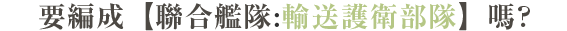
<style>
.page{position:relative;width:567px;height:31px;background:#ffffff}
.page>*{position:absolute;margin:0}
.t1{font:28px "RyuminPr6N-ExBold";letter-spacing:0.05em;color:#4c4843}
.t2{font:28px "RyuminPr6N-ExBold";letter-spacing:0.05em;color:#323232}
.t3{font:28px "RyuminPr6N-ExBold";letter-spacing:0.05em;color:#b5c785}
</style>
<div class="page">
<p class="t1" style="left:39px;top:2px;width:491px;height:29px">要編成【聯合艦隊<span class="t2">:</span><span class="t3">輸送護衛部隊</span>】嗎?</p>
</div>
